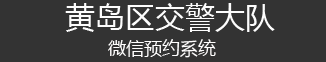
<style>
.page{position:relative;width:326px;height:62px;background:#333333}
.page>*{position:absolute;margin:0}
.t1{font:30px "MicrosoftYaHei";color:#fdfdfd}
.t2{font:18px "MicrosoftYaHei";color:#fffefe}
</style>
<div class="page">
<p class="t1" style="left:65px;top:3px;width:210px;height:29px">黄岛区交警大队</p>
<p class="t2" style="left:108px;top:39px;width:108px;height:19px">微信预约系统</p>
</div>
